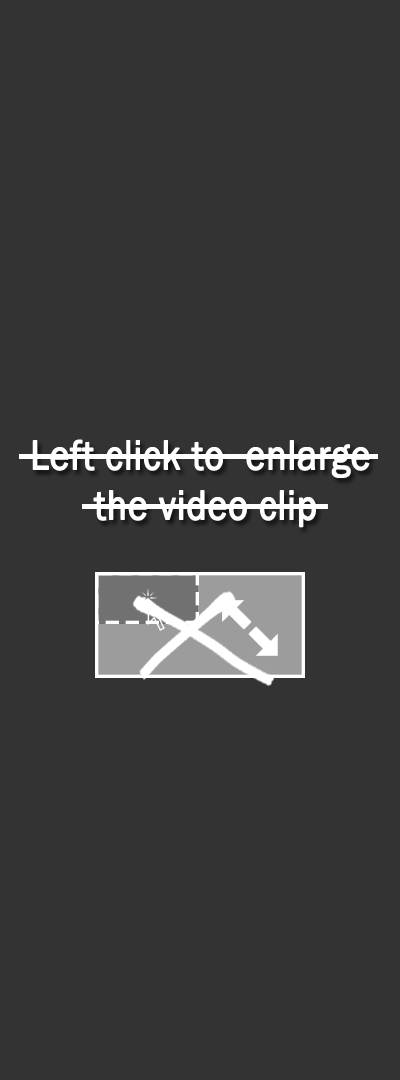
<style>
.page{position:relative;width:400px;height:1080px;background:#333333}
.page>*{position:absolute;margin:0}
.t1{font:43.1px/50px "FranklinGothic-Book";color:#ffffff;font-weight:bold;scale:0.87 1}
</style>
<div class="page">
<p class="t1" style="left:32px;top:439px;width:338px;height:89px;text-align:center">Left click to  enlarge<br> the video clip</p>
</div>
